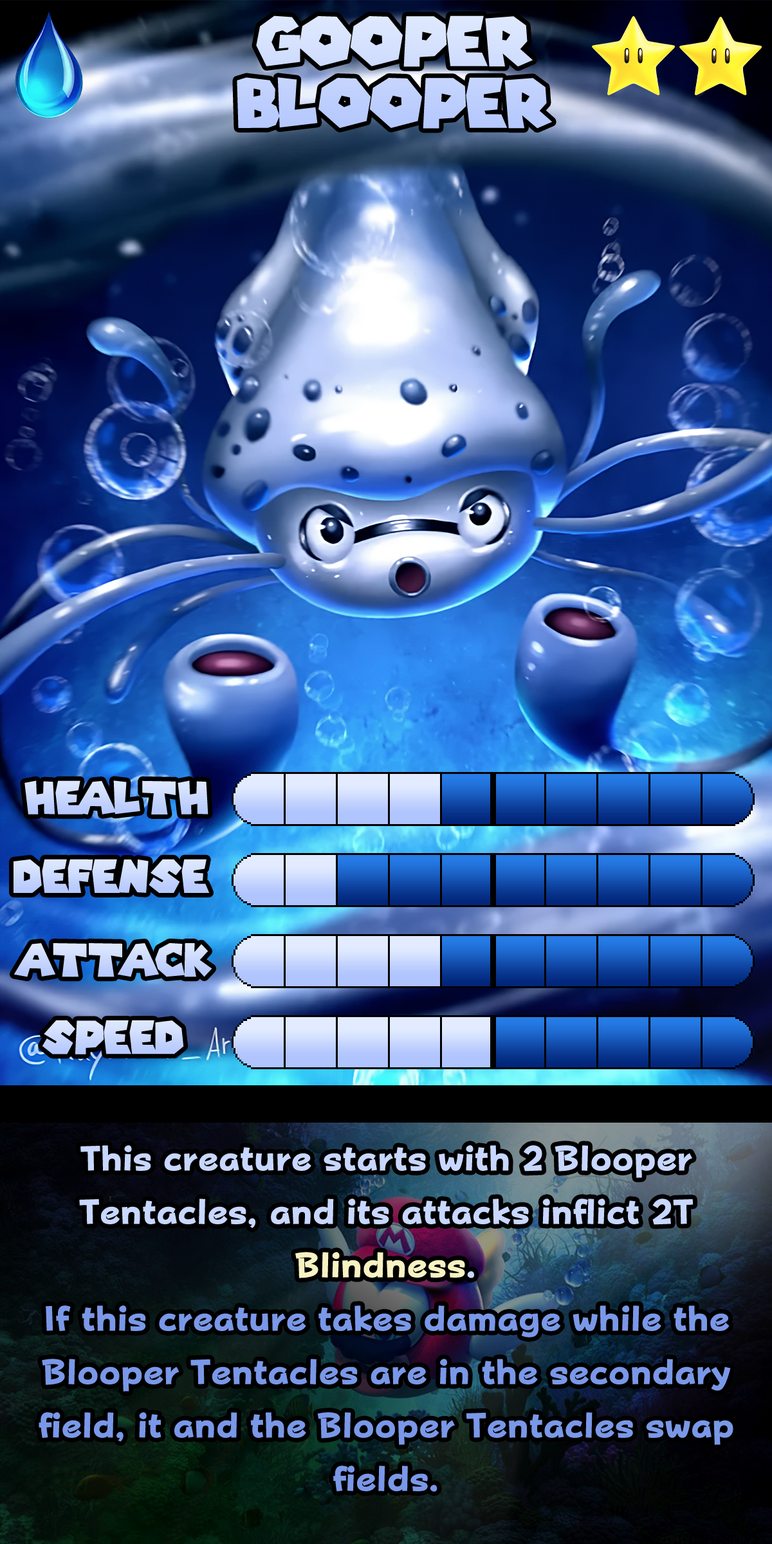
<style>
.page{position:relative;width:772px;height:1544px}
.page>*{position:absolute;margin:0}
.t1{font:115.8px/61.8px "SuperMarioGalaxy";color:#c5d5fe}
.t2{font:77.2px "SuperMarioGalaxy";color:#c9d8fe}
.t3{font:77.2px "SuperMarioGalaxy";color:#cad9fe}
.t4{font:77.2px "SuperMarioGalaxy";color:#cad8fe}
.t5{font:59.8px/53.4px "FOT-PopHappinessStd-EB";color:#7a98e8}
.t6{font:59.8px/53.4px "FOT-PopHappinessStd-EB";color:#c8d7ff}
.t7{font:59.8px/53.4px "FOT-PopHappinessStd-EB";color:#f9f2c2}
</style>
<div class="page">
<p class="t1" style="left:237px;top:15px;width:315px;height:114px;text-align:center">Gooper<br>Blooper</p>
<p class="t2" style="left:24px;top:781px;width:184px;height:34px">Health</p>
<p class="t3" style="left:14px;top:859px;width:196px;height:34px">Defense</p>
<p class="t2" style="left:14px;top:943px;width:198px;height:34px">Attack</p>
<p class="t4" style="left:42px;top:1021px;width:142px;height:34px">Speed</p>
<p class="t5" style="left:39px;top:1145px;width:695px;height:347px;text-align:center"><span class="t6">This creature starts with 2 Blooper Tentacles, and its attacks inflict 2T </span><span class="t7">Blindness</span><span class="t6">.<br></span>If this creature takes damage while the Blooper Tentacles are in the secondary field, it and the Blooper Tentacles swap fields.</p>
</div>
